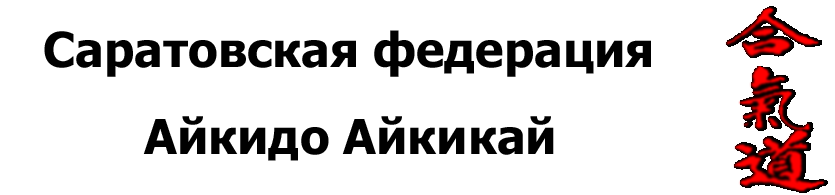
<style>
.page{position:relative;width:835px;height:195px;background:#ffffff}
.page>*{position:absolute;margin:0}
.t1{font:48px "Tahoma-Bold";color:#000000}
</style>
<div class="page">
<p class="t1" style="left:44px;top:30px;width:607px;height:47px">Саратовская федерация</p>
<p class="t1" style="left:143px;top:116px;width:411px;height:45px">Айкидо Айкикай</p>
</div>
